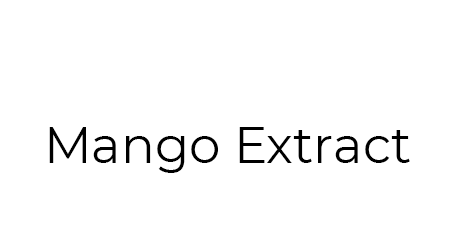
<style>
.page{position:relative;width:455px;height:238px;background:#ffffff}
.page>*{position:absolute;margin:0}
.t1{font:50px "Montserrat-Regular";color:#000000}
</style>
<div class="page">
<p class="t1" style="left:49px;top:127px;width:361px;height:46px">Mango Extract</p>
</div>
